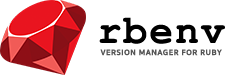
<style>
.page{position:relative;width:225px;height:75px;background:#ffffff}
.page>*{position:absolute;margin:0}
.t1{font:39.7px "CourierNewPS-BoldMT";letter-spacing:0.05em;color:#000000}
.t2{font:7.9px "SukhumvitSet-Bold";letter-spacing:0.075em;color:#555555;text-transform:uppercase}
</style>
<div class="page">
<p class="t1" style="left:99px;top:17px;width:126px;height:27px">rbenv</p>
<p class="t2" style="left:100px;top:49px;width:122px;height:7px">version manager for ruby</p>
</div>
